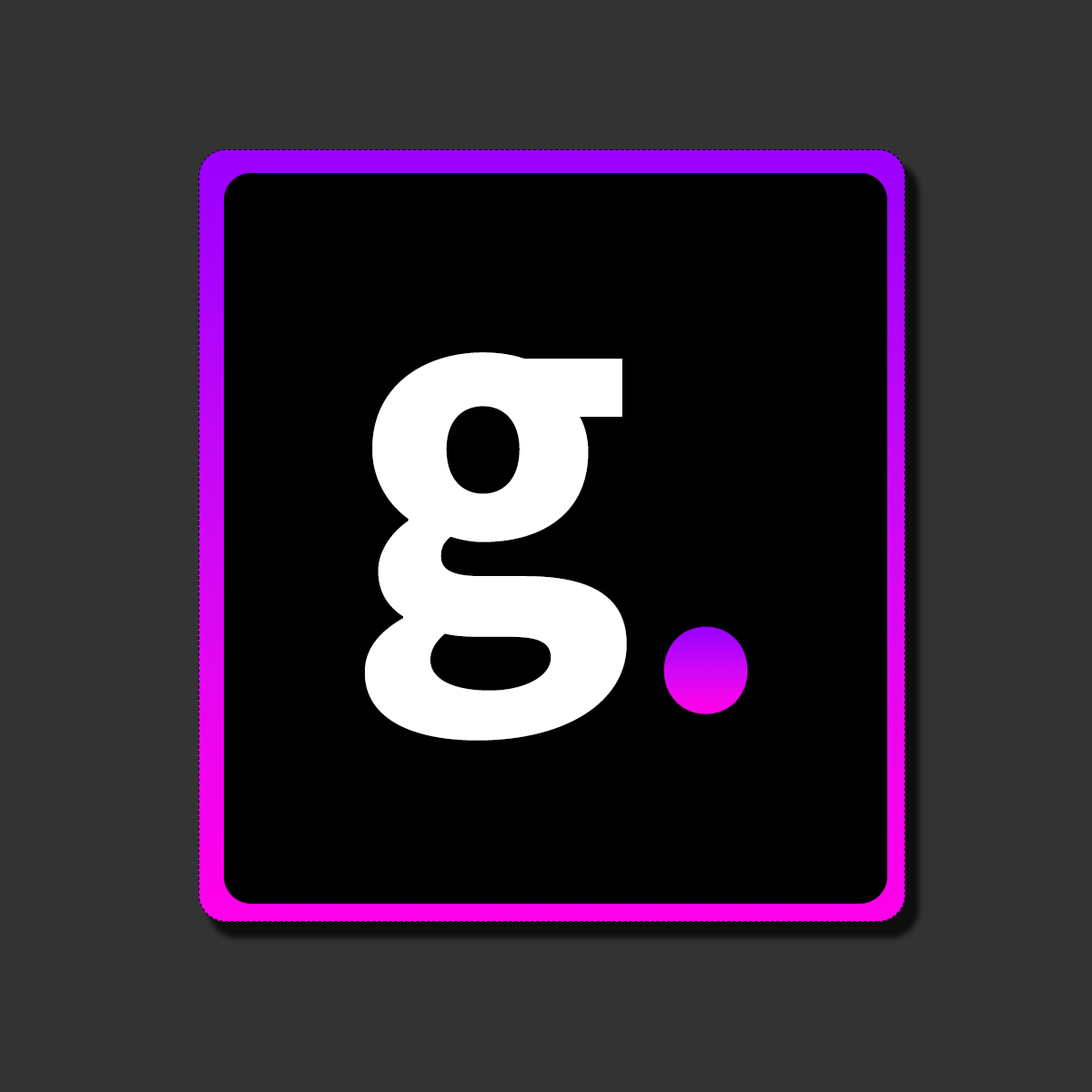
<style>
.page{position:relative;width:1092px;height:1092px;background:#333333}
.page>*{position:absolute;margin:0}
.t1{font:539.4px "SourceSansPro-Bold";color:#ffffff}
</style>
<div class="page">
<p class="t1" style="left:365px;top:352px;width:262px;height:389px">g</p>
</div>
